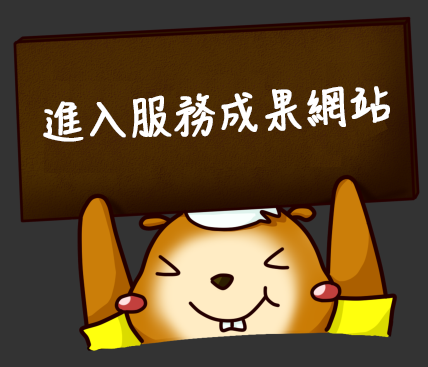
<style>
.page{position:relative;width:428px;height:367px;background:#333333}
.page>*{position:absolute;margin:0}
.t1{font:41.7px "HanziPenTC-W5";color:#ffffff;font-weight:bold}
</style>
<div class="page">
<p class="t1" style="left:43px;top:86px;width:347px;height:56px;rotate:-3deg">進入服務成果網站</p>
</div>
